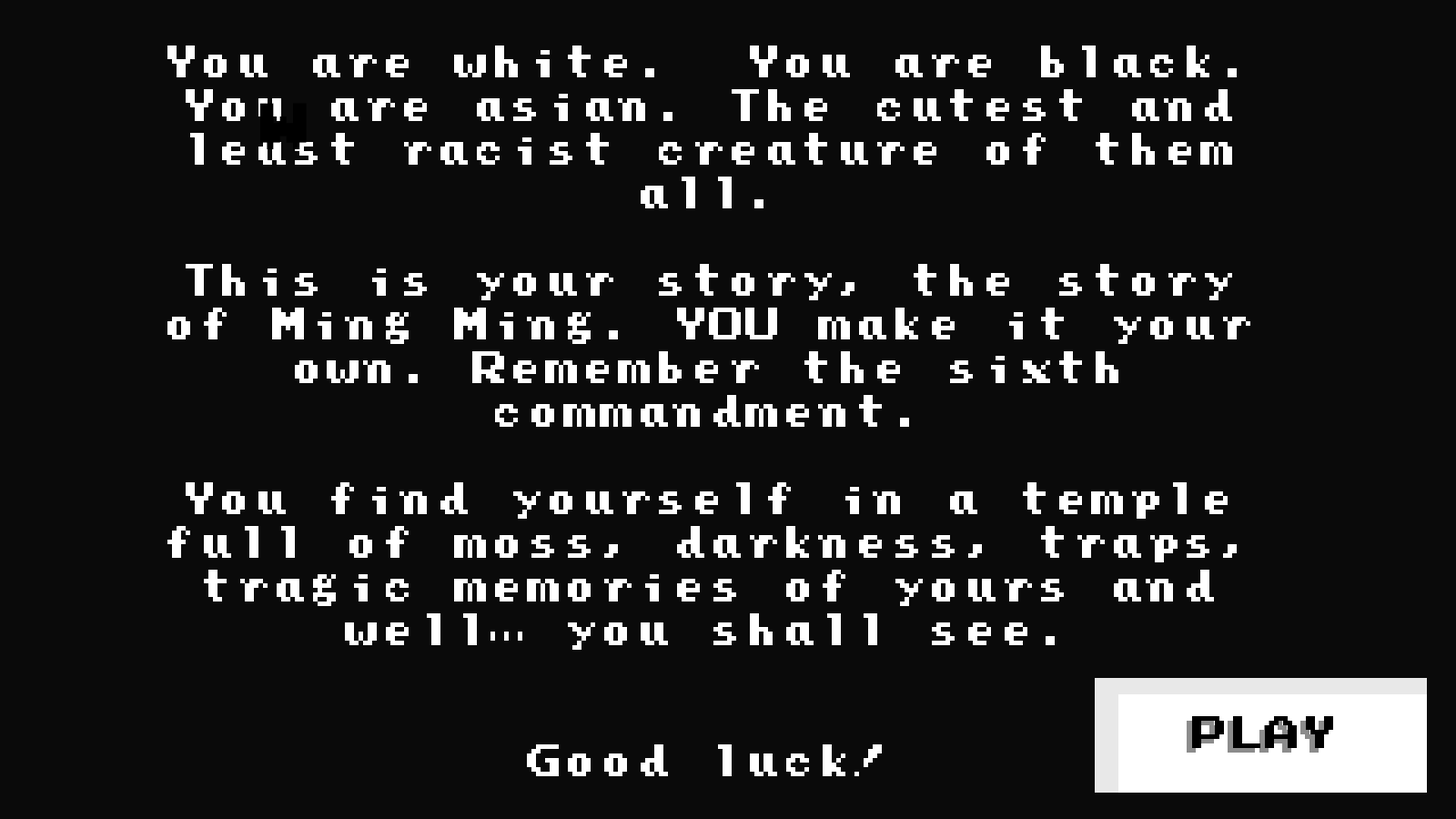
<style>
.page{position:relative;width:1456px;height:819px;background:#0a0a0a}
.page>*{position:absolute;margin:0}
.t1{font:36.4px "PressStartReg";color:#ffffff}
.t2{font:52.5px "PressStartReg";color:#000000}
.t3{font:36.4px "PressStartReg";color:#000000}
</style>
<div class="page">
<p class="t1" style="left:167px;top:45px;width:1083px;height:731px;text-align:center">You are white.  You are black. You are asian. The cutest and least racist creature of them all.<br><br>This is your story, the story of Ming Ming. YOU make it your own. Remember the sixth <br>commandment.<br><br>You find yourself in a temple full of moss, darkness, traps, tragic memories of yours and well... you shall see.<br><br><br>Good luck!</p>
<p class="t2" style="left:260px;top:103px;width:47px;height:46px">W</p>
<p class="t3" style="left:1192px;top:716px;width:141px;height:32px">PLAY</p>
</div>
